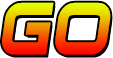
<style>
.page{position:relative;width:113px;height:58px;background:#ffffff}
.page>*{position:absolute;margin:0}
.t1{font:100px "Bitsumishi";letter-spacing:0.04em;font-style:italic;scale:0.81 1}
</style>
<div class="page">
<p class="t1" style="left:2px;top:2px;width:109px;height:53px">GO</p>
</div>
